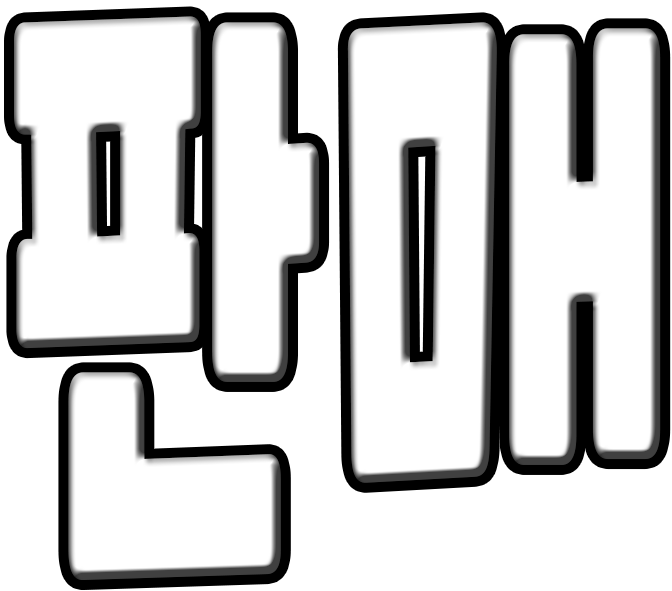
<style>
.page{position:relative;width:672px;height:591px;background:#ffffff}
.page>*{position:absolute;margin:0}
.t1{font:593.1px "CookieRunOTF-Black";color:#ffffff;scale:0.58 1}
</style>
<div class="page">
<p class="t1" style="left:14px;top:16px;width:647px;height:564px">판매</p>
</div>
